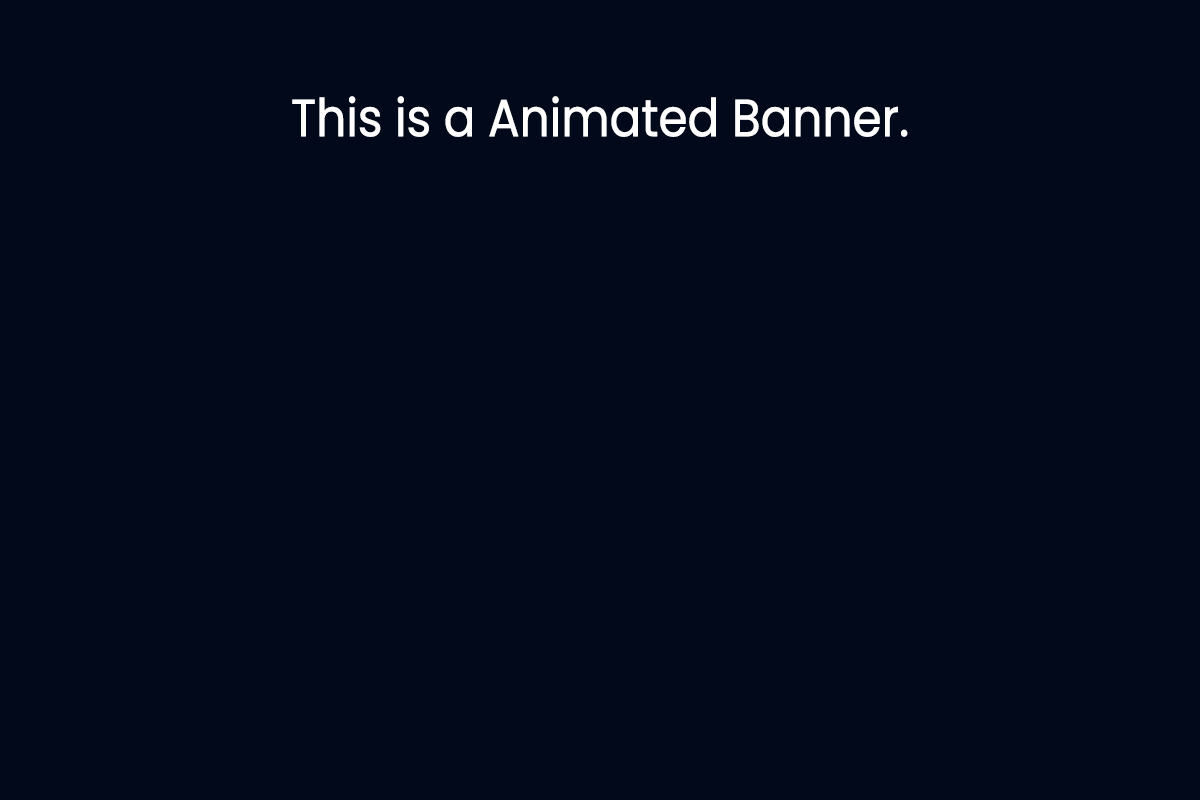
<style>
.page{position:relative;width:1200px;height:800px;background:#01091a}
.page>*{position:absolute;margin:0}
.t1{font:52px "Poppins-Regular";letter-spacing:-0.025em;color:#ffffff;font-weight:bold;scale:0.9 1}
</style>
<div class="page">
<p class="t1" style="left:292px;top:96px;width:616px;height:41px">This is a Animated Banner.</p>
</div>
